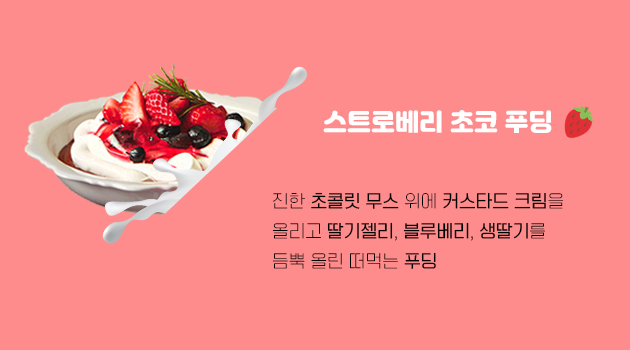
<style>
.page{position:relative;width:630px;height:350px;background:#ff8c8c}
.page>*{position:absolute;margin:0}
.t1{font:24px "Jalnan";color:#ffffff}
.t2{font:17px/30px "TTOmniGothicT";color:#000000}
.t3{font:17px/30px "TTOmniGothicM";color:#000000}
</style>
<div class="page">
<p class="t1" style="left:323px;top:110px;width:229px;height:23px">스트로베리 초코 푸딩</p>
<p class="t2" style="left:272px;top:192px;width:292px;height:77px">진한 <span class="t3">초콜릿 무스</span> 위에 <span class="t3">커스타드 크림</span>을 <br>올리고 <span class="t3">딸기젤리</span>, <span class="t3">블루베리</span>, <span class="t3">생딸기</span>를 <br>듬뿍 올린 떠먹는 <span class="t3">푸딩</span></p>
</div>
